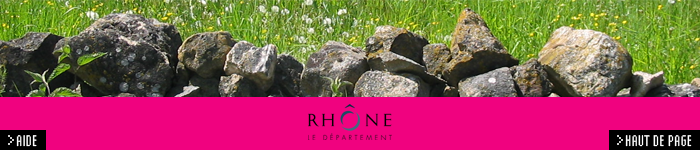
<style>
.page{position:relative;width:700px;height:150px;background:#f0027f}
.page>*{position:absolute;margin:0}
.t1{font:16px "LoResFifTeenNarrow";color:#ffffff}
</style>
<div class="page">
<p class="t1" style="left:16px;top:135px;width:21px;height:12px">AIDE</p>
<p class="t1" style="left:625px;top:135px;width:67px;height:12px">HAUT DE PAGE</p>
</div>
